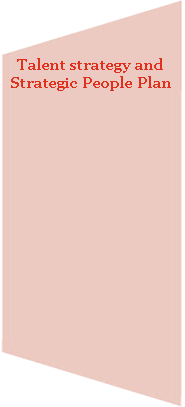
<style>
.page{position:relative;width:185px;height:407px;background:#eccac1}
.page>*{position:absolute;margin:0}
.t1{font:15px "Georgia-Bold";color:#e0301e}
</style>
<div class="page">
<p class="t1" style="left:11px;top:58px;width:160px;height:33px;text-align:center">Talent strategy and Strategic People Plan</p>
</div>
